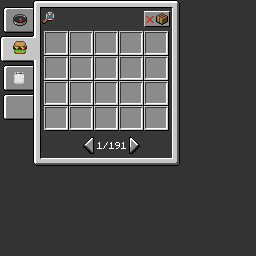
<style>
.page{position:relative;width:256px;height:256px;background:#333333}
.page>*{position:absolute;margin:0}
.t1{font:10px "Minecraft-Regular";color:#ffffff}
</style>
<div class="page">
<p class="t1" style="left:97px;top:142px;width:29px;height:7px">1/191</p>
</div>
